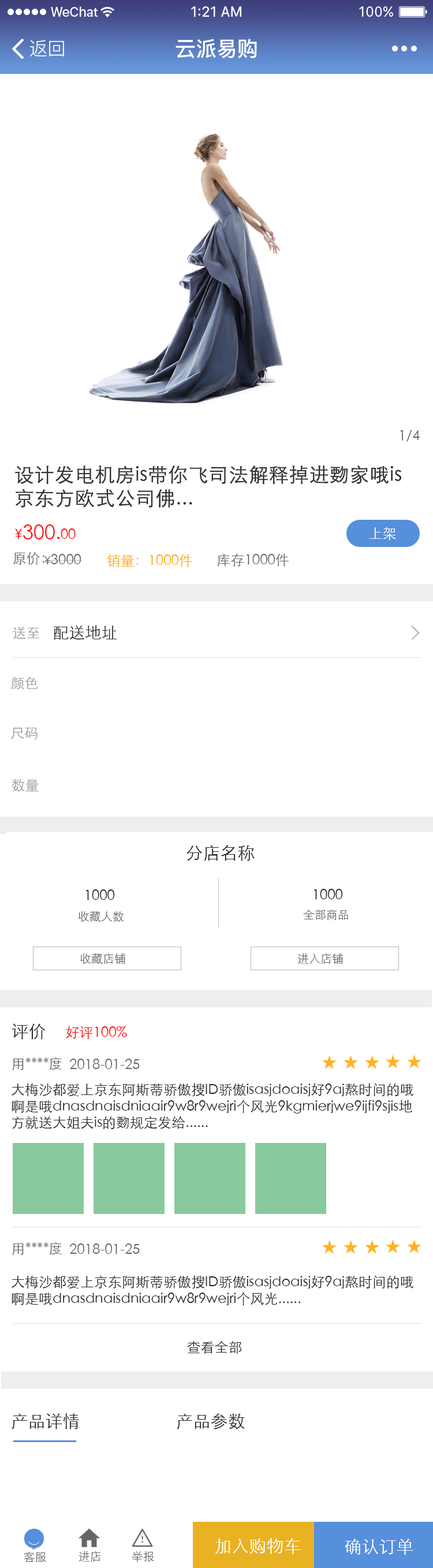
<style>
.page{position:relative;width:433px;height:1568px;background:#ffffff}
.page>*{position:absolute;margin:0}
.t1{font:18.5px "PingFang-SC-Regular";color:#ffffff}
.t2{font:20.8px "PingFang-SC-Bold";color:#ffffff}
.t3{font:13.9px "STXihei";color:#666666}
.t4{font:19.6px "STXihei";color:#333333;font-weight:bold}
.t5{font:19.6px "STXihei";color:#ff0000}
.t6{font:13.9px "STXihei";color:#ff0000}
.t7{font:13.9px "STXihei";color:#ffffff}
.t8{font:11.6px "STXihei";color:#666666}
.t9{font:13.9px "STXihei";color:#ffa800}
.t10{font:13.9px "STXihei";color:#999999}
.t11{font:16.2px "STXihei";color:#333333}
.t12{font:17.3px "STXihei";color:#262626}
.t13{font:13.9px "STXihei";color:#262626}
.t14{font:17.3px "STXihei";color:#ffffff}
</style>
<div class="page">
<p class="t1" style="left:30px;top:40px;width:34px;height:17px">返回</p>
<p class="t2" style="left:176px;top:39px;width:81px;height:19px">云派易购</p>
<p class="t3" style="left:400px;top:430px;width:20px;height:12px">1/4</p>
<p class="t4" style="left:15px;top:465px;width:386px;height:43px">设计发电机房is带你飞司法解释掉进覅家哦is京东方欧式公司佛...</p>
<p class="t5" style="left:15px;top:524px;width:61px;height:15px"><span class="t6">¥</span>300.<span class="t6">00</span></p>
<p class="t7" style="left:370px;top:527px;width:26px;height:13px">上架</p>
<p class="t3" style="left:13px;top:552px;width:31px;height:13px">原价：</p>
<p class="t3" style="left:44px;top:554px;width:37px;height:11px"><span class="t8">¥</span>3000</p>
<p class="t9" style="left:107px;top:554px;width:85px;height:13px">销量：1000件</p>
<p class="t3" style="left:217px;top:553px;width:72px;height:14px">库存1000件</p>
<p class="t10" style="left:13px;top:627px;width:27px;height:12px">送至</p>
<p class="t11" style="left:53px;top:625px;width:64px;height:15px">配送地址</p>
<p class="t10" style="left:11px;top:676px;width:27px;height:14px">颜色</p>
<p class="t10" style="left:11px;top:728px;width:27px;height:11px">尺码</p>
<p class="t10" style="left:12px;top:779px;width:27px;height:13px">数量</p>
<p class="t12" style="left:187px;top:845px;width:68px;height:16px">分店名称</p>
<p class="t13" style="left:86px;top:889px;width:29px;height:11px">1000</p>
<p class="t13" style="left:314px;top:889px;width:29px;height:11px">1000</p>
<p class="t8" style="left:79px;top:911px;width:45px;height:11px">收藏人数</p>
<p class="t8" style="left:303px;top:909px;width:45px;height:11px">全部商品</p>
<p class="t8" style="left:80px;top:953px;width:45px;height:11px">收藏店铺</p>
<p class="t8" style="left:298px;top:954px;width:45px;height:10px">进入店铺</p>
<p class="t12" style="left:12px;top:1023px;width:34px;height:17px">评价</p>
<p class="t6" style="left:66px;top:1026px;width:61px;height:13px">好评100%</p>
<p class="t3" style="left:12px;top:1057px;width:50px;height:13px">用****度</p>
<p class="t3" style="left:69px;top:1059px;width:71px;height:11px">2018-01-25</p>
<p class="t13" style="left:12px;top:1083px;width:402px;height:46px">大梅沙都爱上京东阿斯蒂骄傲搜ID骄傲isasjdoaisj好9aj熬时间的哦啊是哦dnasdnaisdniaair9w8r9wejri个风光9kgmierjwe9ijfi9sjis地方就送大姐夫is的覅规定发给......</p>
<p class="t3" style="left:12px;top:1242px;width:50px;height:13px">用****度</p>
<p class="t3" style="left:69px;top:1243px;width:71px;height:11px">2018-01-25</p>
<p class="t13" style="left:12px;top:1275px;width:402px;height:31px">大梅沙都爱上京东阿斯蒂骄傲搜ID骄傲isasjdoaisj好9aj熬时间的哦啊是哦dnasdnaisdniaair9w8r9wejri个风光......</p>
<p class="t13" style="left:187px;top:1341px;width:55px;height:13px">查看全部</p>
<p class="t12" style="left:12px;top:1413px;width:67px;height:16px">产品详情</p>
<p class="t12" style="left:177px;top:1413px;width:68px;height:16px">产品参数</p>
<p class="t14" style="left:215px;top:1538px;width:85px;height:16px">加入购物车</p>
<p class="t14" style="left:345px;top:1539px;width:69px;height:16px">确认订单</p>
<p class="t8" style="left:24px;top:1551px;width:22px;height:11px">客服</p>
<p class="t8" style="left:79px;top:1551px;width:22px;height:11px">进店</p>
<p class="t8" style="left:132px;top:1551px;width:22px;height:11px">举报</p>
</div>
